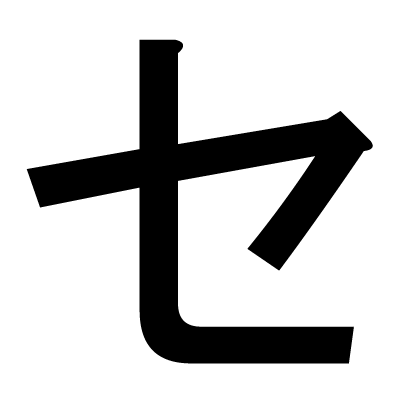
<style>
.page{position:relative;width:400px;height:400px;background:#ffffff}
.page>*{position:absolute;margin:0}
.t1{font:424.8px "MS-PGothic";color:#000000}
</style>
<div class="page">
<p class="t1" style="left:26px;top:39px;width:347px;height:325px">セ</p>
</div>
